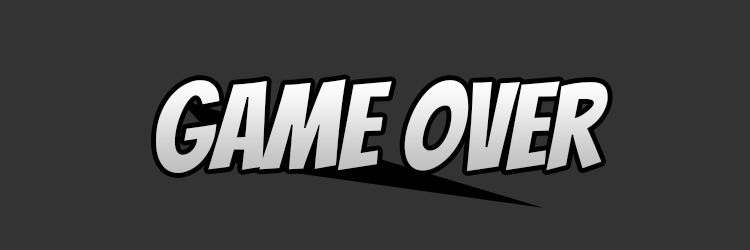
<style>
.page{position:relative;width:750px;height:250px;background:#333333}
.page>*{position:absolute;margin:0}
.t1{font:120px "Bangers-Regular"}
</style>
<div class="page">
<p class="t1" style="left:156px;top:79px;width:452px;height:94px">Game over</p>
</div>
